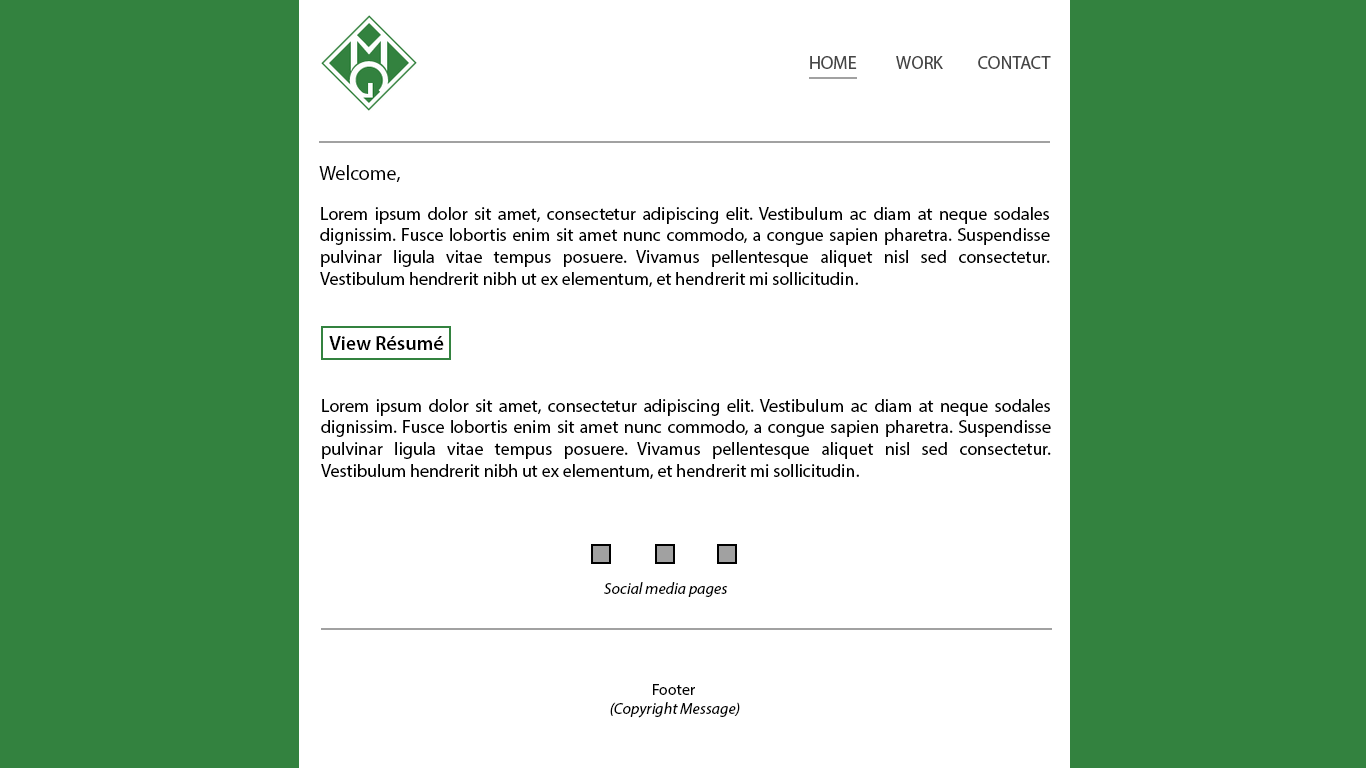
<style>
.page{position:relative;width:1366px;height:768px;background:#ffffff}
.page>*{position:absolute;margin:0}
.t1{font:18px "MyriadPro-Regular";color:#464646}
.t2{font:20px "MyriadPro-Regular";color:#010101}
.t3{font:18px "MyriadPro-Regular";color:#000000}
.t4{font:20px "MyriadPro-Semibold";color:#000000}
.t5{font:16px "MyriadPro-It";color:#000000}
.t6{font:16px "MyriadPro-Regular";color:#000000}
</style>
<div class="page">
<p class="t1" style="left:810px;top:56px;width:47px;height:13px">HOME</p>
<p class="t1" style="left:896px;top:56px;width:47px;height:13px">WORK</p>
<p class="t1" style="left:978px;top:56px;width:73px;height:13px">CONTACT</p>
<p class="t2" style="left:319px;top:165px;width:81px;height:17px">Welcome,</p>
<p class="t3" style="left:320px;top:207px;width:730px;height:80px;text-align:justify">Lorem ipsum dolor sit amet, consectetur adipiscing elit. Vestibulum ac diam at neque sodales dignissim. Fusce lobortis enim sit amet nunc commodo, a congue sapien pharetra. Suspendisse pulvinar ligula vitae tempus posuere. Vivamus pellentesque aliquet nisl sed consectetur. Vestibulum hendrerit nibh ut ex elementum, et hendrerit mi sollicitudin.</p>
<p class="t4" style="left:329px;top:336px;width:115px;height:14px">View Résumé</p>
<p class="t3" style="left:321px;top:399px;width:730px;height:80px;text-align:justify">Lorem ipsum dolor sit amet, consectetur adipiscing elit. Vestibulum ac diam at neque sodales dignissim. Fusce lobortis enim sit amet nunc commodo, a congue sapien pharetra. Suspendisse pulvinar ligula vitae tempus posuere. Vivamus pellentesque aliquet nisl sed consectetur. Vestibulum hendrerit nibh ut ex elementum, et hendrerit mi sollicitudin.</p>
<p class="t5" style="left:604px;top:582px;width:124px;height:15px">Social media pages</p>
<p class="t5" style="left:610px;top:684px;width:130px;height:34px;text-align:center"><span class="t6">Footer <br></span>(Copyright Message)</p>
</div>
